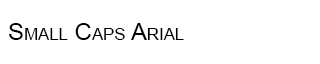
<style>
.page{position:relative;width:320px;height:64px;background:#ffffff}
.page>*{position:absolute;margin:0}
.t1{font:24px "ArialMT";color:#000000;font-variant:small-caps}
</style>
<div class="page">
<p class="t1" style="left:9px;top:23px;width:175px;height:17px">Small Caps Arial</p>
</div>
